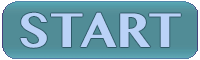
<style>
.page{position:relative;width:200px;height:60px;background:#518c96}
.page>*{position:absolute;margin:0}
.t1{font:48px "TamilMN-Bold";color:#bad2f7}
</style>
<div class="page">
<p class="t1" style="left:20px;top:12px;width:161px;height:36px">START</p>
</div>
